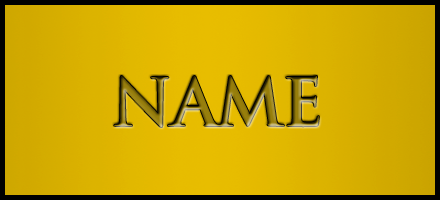
<style>
.page{position:relative;width:440px;height:200px}
.page>*{position:absolute;margin:0}
.t1{font:65px "TrajanPro-Bold";letter-spacing:-0.02em}
</style>
<div class="page">
<p class="t1" style="left:114px;top:76px;width:205px;height:51px">NAME</p>
</div>
